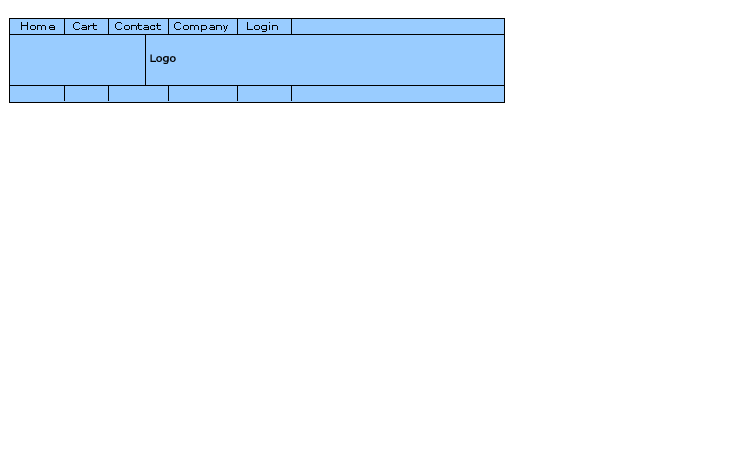
<style>
.page{position:relative;width:750px;height:450px;background:#ffffff}
.page>*{position:absolute;margin:0}
.t1{font:10px "Verdana";letter-spacing:0.025em;color:#000000;scale:1.15 1}
.t2{font:10px "Verdana";letter-spacing:-0.025em;color:#000000;scale:1.15 1}
</style>
<div class="page">
<p class="t1" style="left:21px;top:22px;width:257px;height:10px">Home    Cart    Contact   Company    Login</p>
<p class="t2" style="left:150px;top:54px;width:26px;height:10px">Logo</p>
</div>
